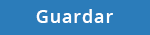
<style>
.page{position:relative;width:150px;height:35px;background:#2b7cba}
.page>*{position:absolute;margin:0}
.t1{font:18px "OpenSans-Semibold";letter-spacing:0.05em;color:#ffffff}
</style>
<div class="page">
<p class="t1" style="left:36px;top:9px;width:77px;height:14px">Guardar</p>
</div>
